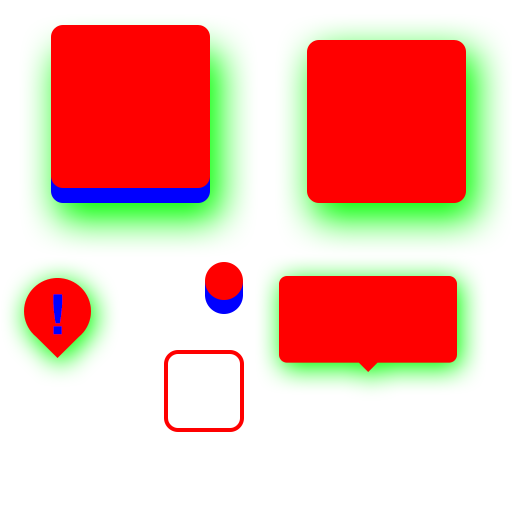
<style>
.page{position:relative;width:512px;height:512px;background:#ffffff}
.page>*{position:absolute;margin:0}
.t1{font:60px "CoolveticaRg-Regular";letter-spacing:0.2em;color:#0000ff}
</style>
<div class="page">
<p class="t1" style="left:53px;top:294px;width:10px;height:41px">!</p>
</div>
